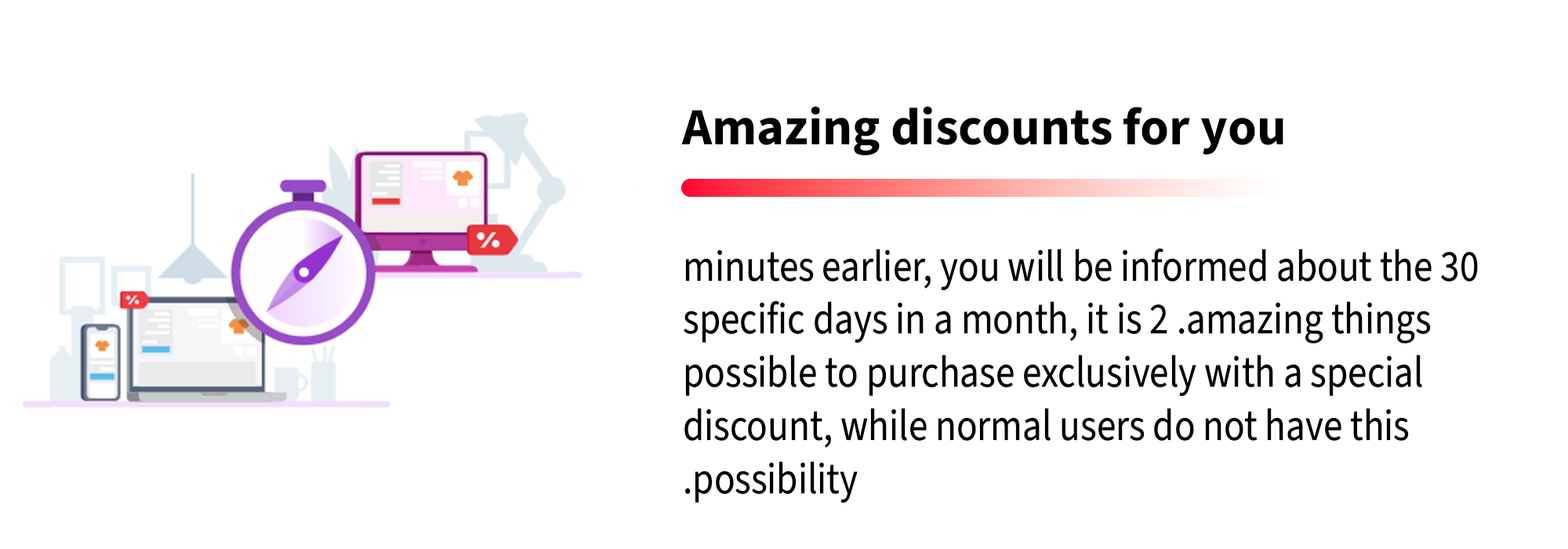
<style>
.page{position:relative;width:1568px;height:549px;background:#ffffff}
.page>*{position:absolute;margin:0}
.t1{font:52.3px "SourceSans3Roman-Bold";color:#000000}
.t2{font:44.3px "SourceSans3Roman-Regular";color:#000000;scale:0.87 1}
</style>
<div class="page">
<p class="t1" style="left:681px;top:106px;width:602px;height:49px">Amazing discounts for you</p>
<p class="t2" style="left:684px;top:248px;width:794px;height:255px;text-align:right">30 minutes earlier, you will be informed about the amazing things. 2 specific days in a month, it is possible to purchase exclusively with a special discount, while normal users do not have this possibility.</p>
</div>
